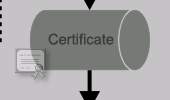
<style>
.page{position:relative;width:170px;height:100px;background:#c6c3c6}
.page>*{position:absolute;margin:0}
.t1{font:14.7px "ArialMT";color:#3b3c3b}
</style>
<div class="page">
<p class="t1" style="left:48px;top:33px;width:66px;height:12px">Certificate</p>
</div>
